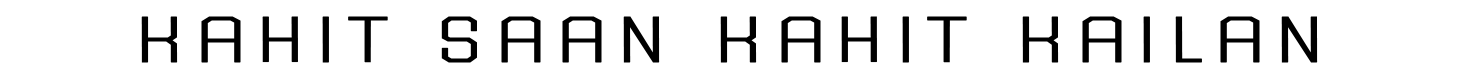
<style>
.page{position:relative;width:1463px;height:74px;background:#ffffff}
.page>*{position:absolute;margin:0}
.t1{font:68.7px "Futurama-Light";letter-spacing:0.075em;color:#000000;font-weight:bold;scale:1.76 1}
</style>
<div class="page">
<p class="t1" style="left:141px;top:16px;width:1177px;height:47px">KAHIT SAAN KAHIT KAILAN</p>
</div>
